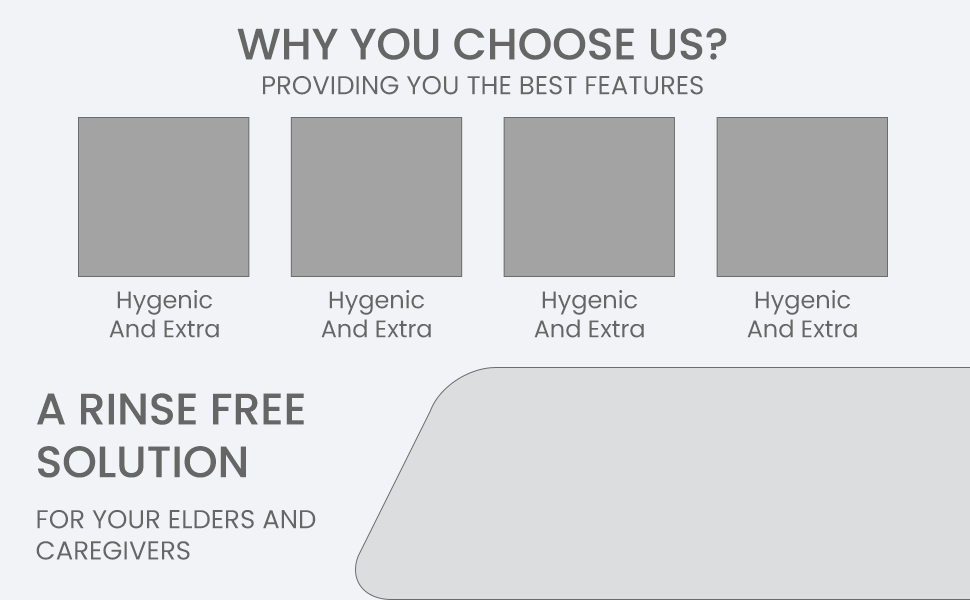
<style>
.page{position:relative;width:970px;height:600px;background:#f2f3f6}
.page>*{position:absolute;margin:0}
.t1{font:44px "Poppins-Medium";color:#666666;text-transform:uppercase}
.t2{font:26px "Poppins-Regular";color:#666666}
.t3{font:24px "Poppins-Regular";color:#666666}
</style>
<div class="page">
<p class="t1" style="left:237px;top:28px;width:490px;height:32px">WHY YOU CHOOSE US?</p>
<p class="t2" style="left:263px;top:76px;width:440px;height:19px">PROVIDING YOU THE BEST FEATURES</p>
<p class="t3" style="left:109px;top:290px;width:110px;height:48px;text-align:center">Hygenic<br>And Extra</p>
<p class="t3" style="left:321px;top:290px;width:110px;height:48px;text-align:center">Hygenic<br>And Extra</p>
<p class="t3" style="left:534px;top:290px;width:110px;height:48px;text-align:center">Hygenic<br>And Extra</p>
<p class="t3" style="left:747px;top:290px;width:110px;height:48px;text-align:center">Hygenic<br>And Extra</p>
<p class="t1" style="left:37px;top:393px;width:267px;height:85px">A RINSE FREE<br>SOLUTION</p>
<p class="t2" style="left:36px;top:510px;width:280px;height:50px">FOR YOUR ELDERS AND<br>CAREGIVERS</p>
</div>
